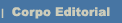
<style>
.page{position:relative;width:122px;height:23px;background:#4775a3}
.page>*{position:absolute;margin:0}
.t1{font:12px "Arial-Black";color:#cdccba}
.t2{font:10px "Arial-Black";color:#cdccba}
</style>
<div class="page">
<p class="t1" style="left:1px;top:7px;width:109px;height:12px"><span class="t2">|</span>  Corpo Editorial</p>
</div>
